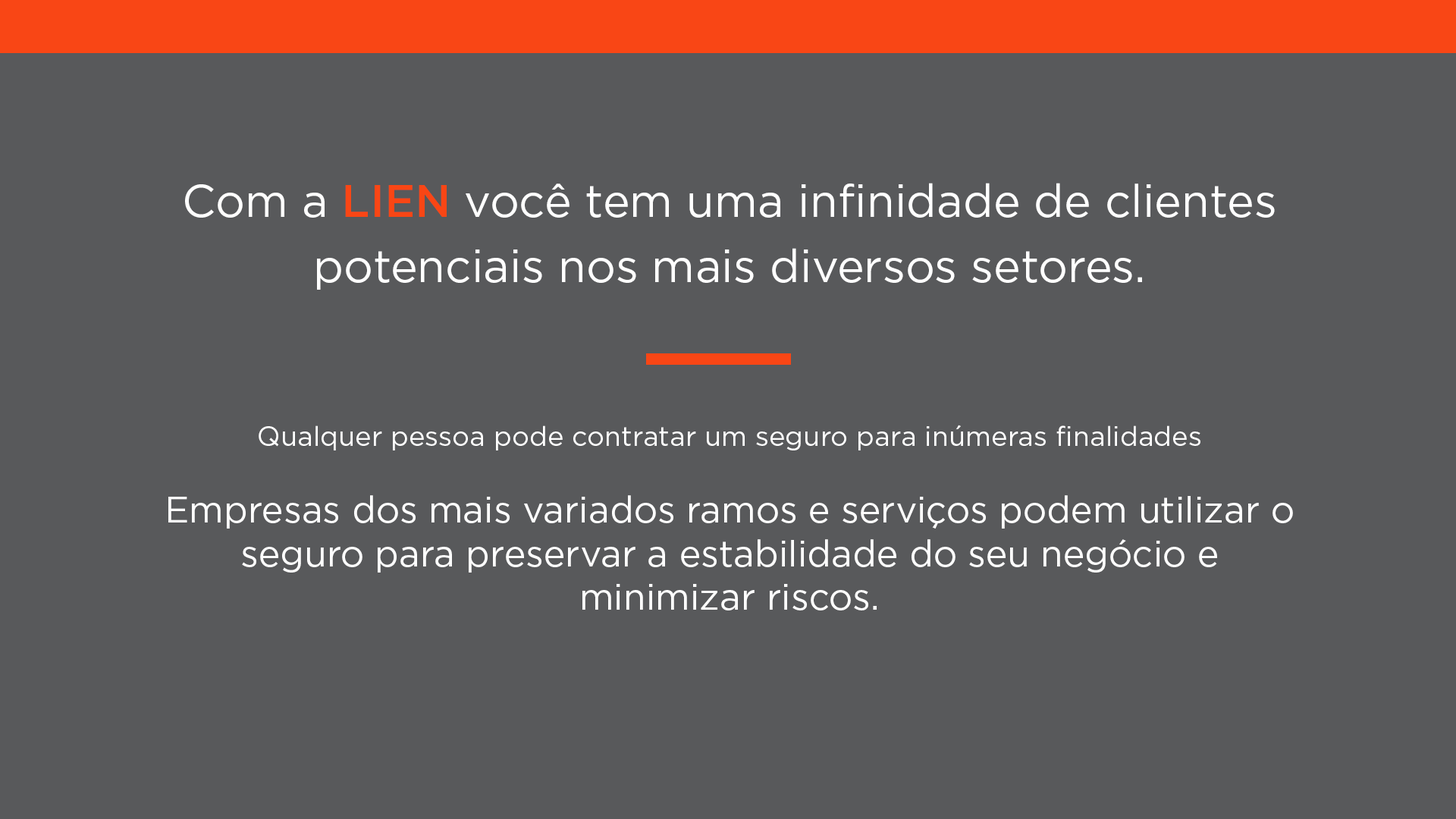
<style>
.page{position:relative;width:1456px;height:819px;background:#58595b}
.page>*{position:absolute;margin:0}
.t1{font:36.4px "Gotham-Book";color:#ffffff}
.t2{font:45.5px "Gotham-Book";color:#ffffff}
.t3{font:45.5px "Gotham-Medium";color:#f94615}
.t4{font:27.3px "Gotham-Book";color:#ffffff}
</style>
<div class="page">
<p class="t1" style="left:168px;top:183px;width:1125px;height:427px;text-align:center"><span class="t2">Com a </span><span class="t3">LIEN</span><span class="t2"> você tem uma infinidade de clientes potenciais nos mais diversos setores.  <br><br></span><span class="t4"><br><br>Qualquer pessoa pode contratar um seguro para inúmeras finalidades<br><br></span>Empresas dos mais variados ramos e serviços podem utilizar o seguro para preservar a estabilidade do seu negócio e minimizar riscos.</p>
</div>
